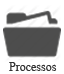
<style>
.page{position:relative;width:64px;height:74px;background:#ffffff}
.page>*{position:absolute;margin:0}
.t1{font:12px "TimesNewRomanPSMT";color:#333333}
</style>
<div class="page">
<p class="t1" style="left:9px;top:62px;width:48px;height:9px">Processos</p>
</div>
